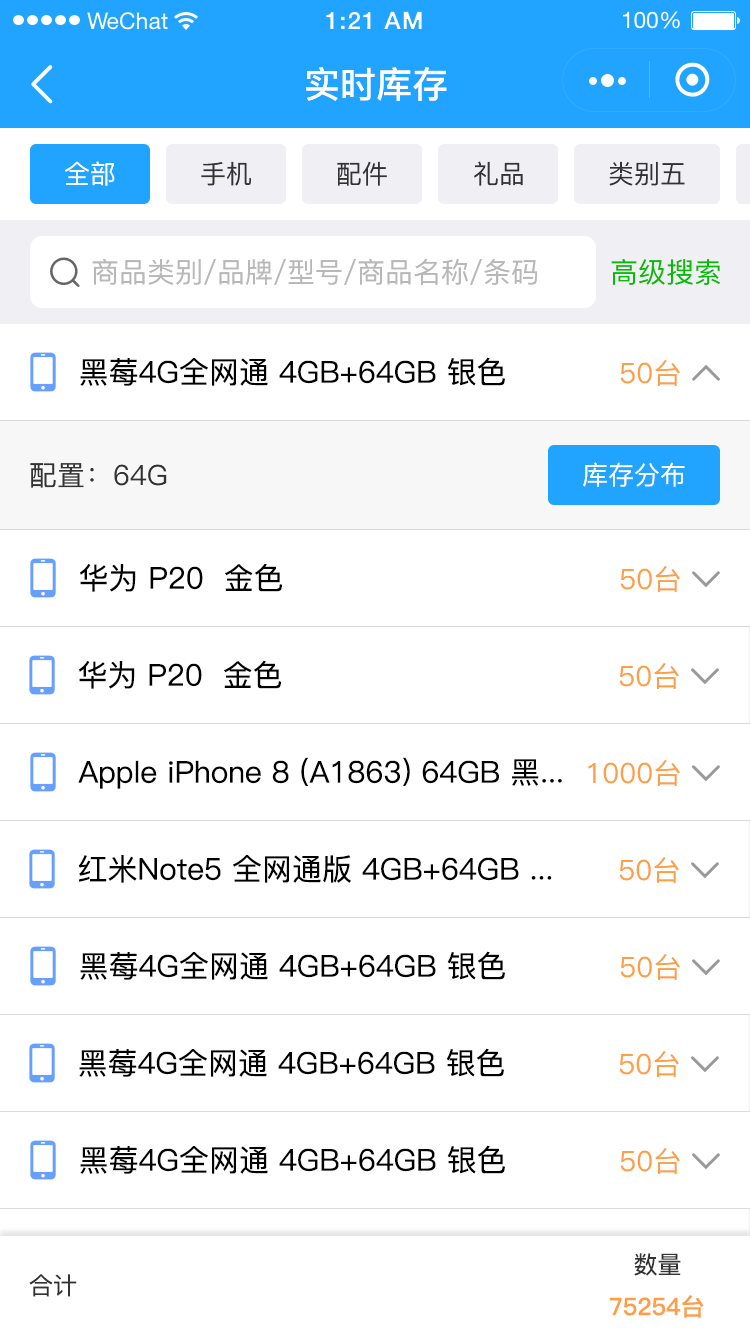
<style>
.page{position:relative;width:750px;height:1334px;background:#ffffff}
.page>*{position:absolute;margin:0}
.t1{font:36px "PingFang-SC-Bold";color:#ffffff}
.t2{font:26px "PingFang-SC-Medium";color:#ffffff}
.t3{font:26px "PingFang-SC-Medium";color:#333333}
.t4{font:28px "PingFang-SC-Medium";color:#b8b8b8}
.t5{font:28px "PingFang-SC-Medium";color:#09bb07}
.t6{font:30px "PingFang-SC-Medium";color:#000000}
.t7{font:28px "PingFang-SC-Medium";color:#fe9f45}
.t8{font:28px "PingFang-SC-Medium";color:#333333}
.t9{font:24px "PingFang-SC-Medium";color:#333333}
.t10{font:24px "PingFang-SC-Bold";color:#fe9f45}
</style>
<div class="page">
<p class="t1" style="left:306px;top:67px;width:141px;height:34px">实时库存</p>
<p class="t2" style="left:65px;top:161px;width:50px;height:25px">全部</p>
<p class="t3" style="left:201px;top:161px;width:50px;height:25px">手机</p>
<p class="t3" style="left:337px;top:161px;width:50px;height:25px">配件</p>
<p class="t3" style="left:474px;top:161px;width:49px;height:25px">礼品</p>
<p class="t3" style="left:609px;top:161px;width:76px;height:25px">类别五</p>
<p class="t4" style="left:92px;top:258px;width:445px;height:27px">商品类别/品牌/型号/商品名称/条码</p>
<p class="t5" style="left:611px;top:259px;width:109px;height:26px">高级搜索</p>
<p class="t6" style="left:80px;top:357px;width:425px;height:29px">黑莓4G全网通 4GB+64GB 银色</p>
<p class="t7" style="left:620px;top:360px;width:60px;height:26px">50台</p>
<p class="t2" style="left:583px;top:462px;width:102px;height:25px">库存分布</p>
<p class="t8" style="left:30px;top:463px;width:137px;height:25px">配置：64G</p>
<p class="t6" style="left:80px;top:563px;width:203px;height:29px">华为 P20  金色</p>
<p class="t7" style="left:620px;top:566px;width:60px;height:26px">50台</p>
<p class="t6" style="left:79px;top:660px;width:203px;height:29px">华为 P20  金色</p>
<p class="t7" style="left:619px;top:663px;width:60px;height:26px">50台</p>
<p class="t6" style="left:78px;top:757px;width:484px;height:32px">Apple iPhone 8 (A1863) 64GB 黑...</p>
<p class="t7" style="left:588px;top:760px;width:92px;height:26px">1000台</p>
<p class="t6" style="left:78px;top:855px;width:474px;height:28px">红米Note5 全网通版 4GB+64GB ...</p>
<p class="t7" style="left:619px;top:857px;width:60px;height:26px">50台</p>
<p class="t6" style="left:80px;top:951px;width:425px;height:29px">黑莓4G全网通 4GB+64GB 银色</p>
<p class="t7" style="left:620px;top:954px;width:60px;height:26px">50台</p>
<p class="t6" style="left:79px;top:1048px;width:425px;height:29px">黑莓4G全网通 4GB+64GB 银色</p>
<p class="t7" style="left:619px;top:1051px;width:60px;height:26px">50台</p>
<p class="t6" style="left:80px;top:1145px;width:425px;height:29px">黑莓4G全网通 4GB+64GB 银色</p>
<p class="t7" style="left:620px;top:1148px;width:60px;height:26px">50台</p>
<p class="t9" style="left:634px;top:1253px;width:47px;height:23px">数量</p>
<p class="t9" style="left:29px;top:1274px;width:48px;height:23px">合计</p>
<p class="t10" style="left:609px;top:1295px;width:95px;height:23px">75254台</p>
</div>
